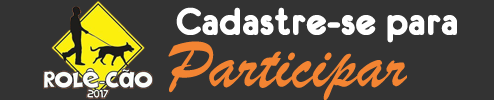
<style>
.page{position:relative;width:494px;height:100px;background:#333333}
.page>*{position:absolute;margin:0}
.t1{font:42px "Eurofurencebold";color:#ffffff}
.t2{font:70.3px "BrushScriptMT";color:#f38432}
</style>
<div class="page">
<p class="t1" style="left:176px;top:7px;width:281px;height:36px">Cadastre-se para</p>
<p class="t2" style="left:168px;top:41px;width:239px;height:60px">Participar</p>
</div>
